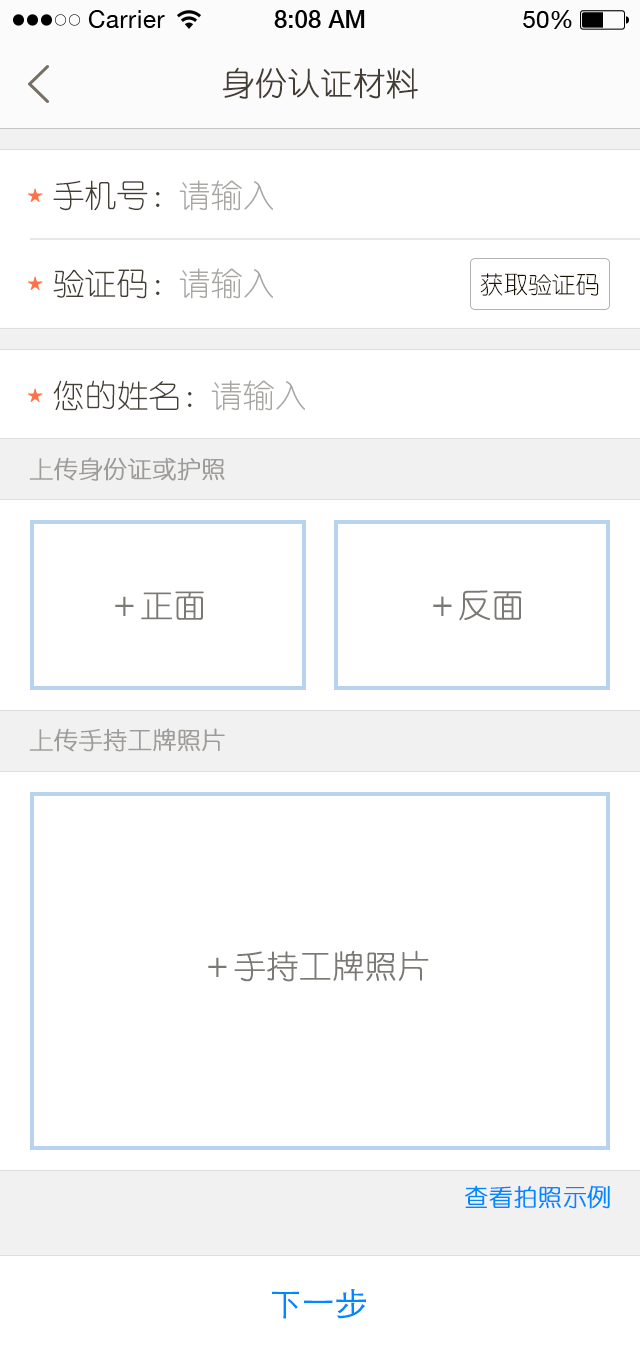
<style>
.page{position:relative;width:640px;height:1354px;background:#ffffff}
.page>*{position:absolute;margin:0}
.t1{font:32px "YouYuan";color:#433d33;text-transform:uppercase;font-weight:bold}
.t2{font:32px "YouYuan";color:#433e34;text-transform:uppercase}
.t3{font:32px "YouYuan";color:#a7a6a3;text-transform:uppercase}
.t4{font:24px "YouYuan";color:#1b1100;text-transform:uppercase}
.t5{font:24px "YouYuan";color:#9e9c99;text-transform:uppercase;font-weight:bold}
.t6{font:32px "YouYuan";color:#7b7973;text-transform:uppercase;font-weight:bold}
.t7{font:24px "YouYuan";color:#0088ff;text-transform:uppercase;font-weight:bold}
.t8{font:32px "STHeitiSC-Light";color:#0088ff;text-transform:uppercase;font-weight:bold}
</style>
<div class="page">
<p class="t1" style="left:222px;top:67px;width:196px;height:32px">身份认证材料</p>
<p class="t2" style="left:53px;top:180px;width:107px;height:31px">手机号：</p>
<p class="t3" style="left:179px;top:180px;width:94px;height:31px">请输入</p>
<p class="t2" style="left:53px;top:269px;width:107px;height:30px">验证码：</p>
<p class="t3" style="left:179px;top:268px;width:94px;height:31px">请输入</p>
<p class="t4" style="left:480px;top:273px;width:119px;height:23px">获取验证码</p>
<p class="t2" style="left:53px;top:380px;width:139px;height:31px">您的姓名：</p>
<p class="t3" style="left:211px;top:380px;width:94px;height:31px">请输入</p>
<p class="t5" style="left:29px;top:457px;width:196px;height:24px">上传身份证或护照</p>
<p class="t6" style="left:115px;top:591px;width:89px;height:29px">＋正面</p>
<p class="t6" style="left:433px;top:590px;width:89px;height:31px">＋反面</p>
<p class="t5" style="left:29px;top:728px;width:196px;height:24px">上传手持工牌照片</p>
<p class="t6" style="left:208px;top:950px;width:221px;height:32px">＋手持工牌照片</p>
<p class="t7" style="left:465px;top:1185px;width:145px;height:24px">查看拍照示例</p>
<p class="t8" style="left:272px;top:1289px;width:94px;height:30px">下一步</p>
</div>
